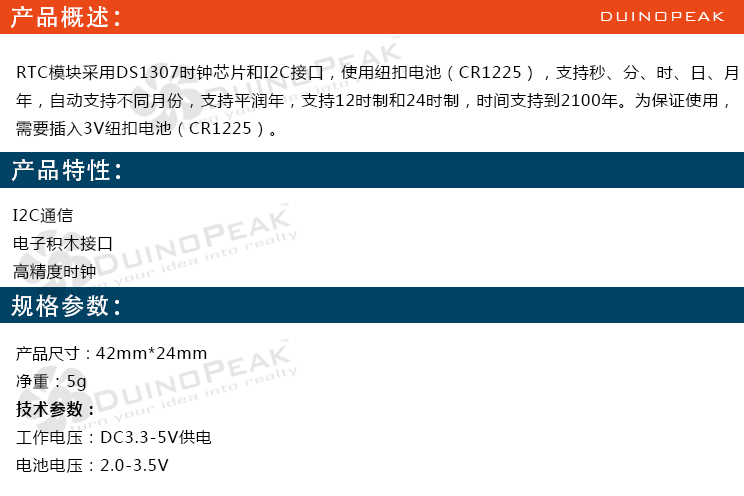
<style>
.page{position:relative;width:744px;height:496px;background:#ffffff}
.page>*{position:absolute;margin:0}
.t1{font:24px "AdobeHeitiStd-Regular";letter-spacing:0.05em;color:#ffffff}
.t2{font:18px "BankGothicBT-Light";letter-spacing:0.05em;color:#ffffff}
.t3{font:16px "MicrosoftYaHei";letter-spacing:0.05em;color:#000000}
.t4{font:16px "MicrosoftYaHei";color:#000000}
.t5{font:16px "MicrosoftYaHei-Bold";letter-spacing:0.05em;color:#000000}
</style>
<div class="page">
<p class="t1" style="left:10px;top:6px;width:109px;height:23px">产品概述：</p>
<p class="t2" style="left:601px;top:12px;width:124px;height:9px">DUINOPEAK</p>
<p class="t3" style="left:16px;top:64px;width:722px;height:73px">RTC模块采用DS1307时钟芯片和I2C接口，使用纽扣电池（CR1225），支持秒、分、时、日、月<br>年，自动支持不同月份，支持平润年，支持12时制和24时制，时间支持到2100年。为保证使用，<br>需要插入3V纽扣电池（CR1225）。</p>
<p class="t1" style="left:11px;top:158px;width:109px;height:24px">产品特性：</p>
<p class="t3" style="left:13px;top:208px;width:99px;height:72px">I2C通信<br>电子积木接口<br>高精度时钟</p>
<p class="t1" style="left:11px;top:294px;width:108px;height:23px">规格参数：</p>
<p class="t3" style="left:16px;top:346px;width:196px;height:127px"><span class="t4">产品尺寸：</span>42mm*24mm<br>净重：5g<br><span class="t5">技术参数：<br></span>工作电压：DC3.3-5V供电<br>电池电压：2.0-3.5V</p>
</div>
